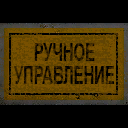
<style>
.page{position:relative;width:128px;height:128px;background:#000000}
.page>*{position:absolute;margin:0}
.t1{font:25px/23px "Arial-BoldMT";scale:0.59 1}
</style>
<div class="page">
<p class="t1" style="left:14px;top:43px;width:101px;height:41px;text-align:center">РУЧНОЕ<br>УПРАВЛЕНИЕ</p>
</div>
